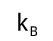
<style>
.page{position:relative;width:53px;height:41px;background:#ffffff}
.page>*{position:absolute;margin:0}
.t1{font:23.7px "DroidSans";color:#000000}
.t2{font:13.4px "DroidSans";color:#000000}
</style>
<div class="page">
<p class="t1" style="left:18px;top:12px;width:10px;height:19px">k</p>
<p class="t2" style="left:30px;top:26px;width:8px;height:10px">B</p>
</div>
